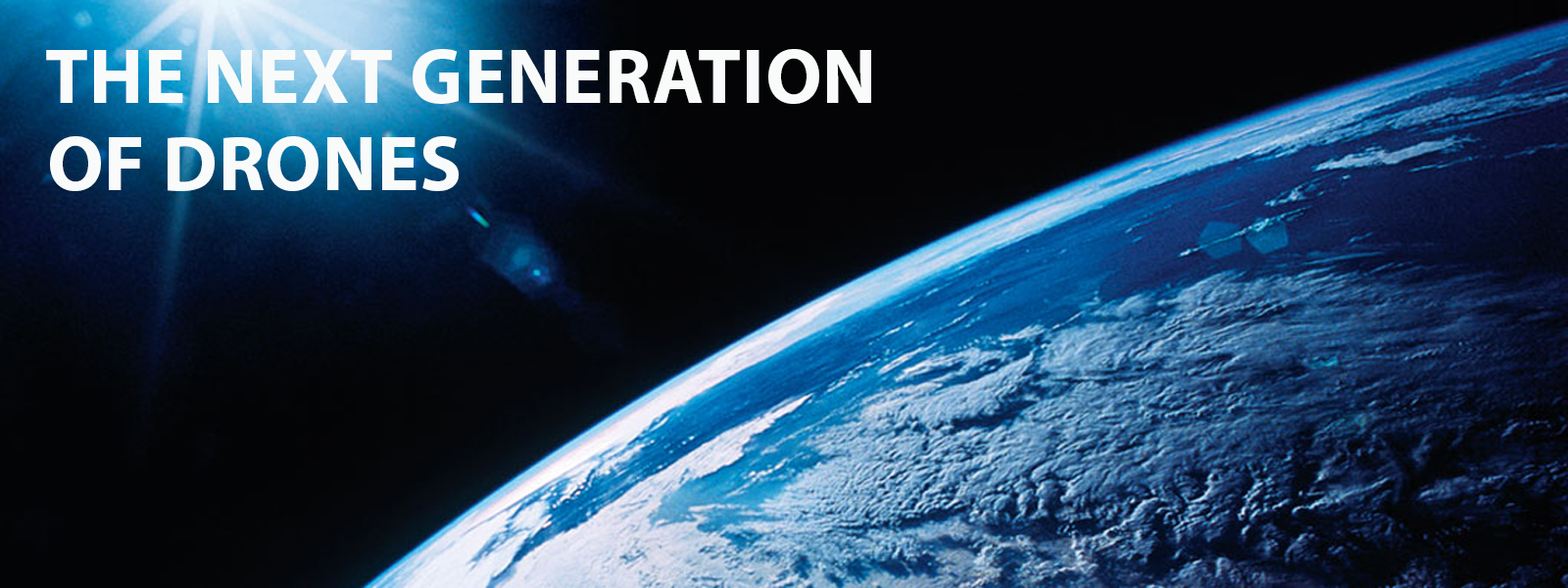
<style>
.page{position:relative;width:1568px;height:588px}
.page>*{position:absolute;margin:0}
.t1{font:78.4px "MyriadPro-Bold";letter-spacing:0.01em;color:#f9fbfb;text-transform:uppercase}
</style>
<div class="page">
<p class="t1" style="left:46px;top:49px;width:825px;height:55px">THE NEXT GENERATION</p>
<p class="t1" style="left:50px;top:136px;width:409px;height:55px">OF DRONES</p>
</div>
